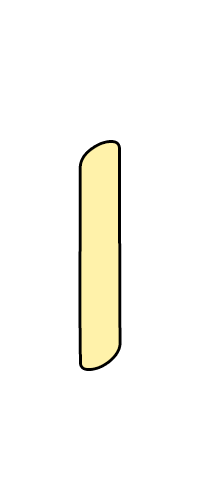
<style>
.page{position:relative;width:200px;height:500px;background:#ffffff}
.page>*{position:absolute;margin:0}
.t1{font:293.8px "AArsoo-Bold";color:#fff2aa;scale:0.96 1}
</style>
<div class="page">
<p class="t1" style="left:81px;top:143px;width:38px;height:225px">1</p>
</div>
